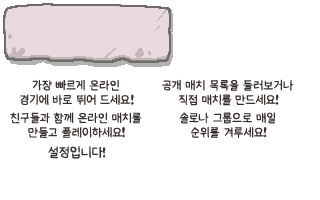
<style>
.page{position:relative;width:320px;height:200px;background:#ffffff}
.page>*{position:absolute;margin:0}
.t1{font:12px/12px "XiaolaiSC";letter-spacing:-0.075em;color:#362f2d}
.t2{font:12px/12px "XiaolaiSC";color:#362f2d}
.t3{font:13.5px/12px "IsaacGame";letter-spacing:-0.075em;color:#362f2d;scale:0.61 1}
.t4{font:13.3px "XiaolaiSC";letter-spacing:-0.075em;color:#362f2d}
.t5{font:13.5px "IsaacGame";letter-spacing:-0.075em;color:#362f2d;scale:0.61 1}
</style>
<div class="page">
<p class="t1" style="left:20px;top:79px;width:114px;height:26px;text-align:center">가장 빠르게 온라인<br>경기에 바로 뛰어 드세<span class="t2">요</span><span class="t3">!</span></p>
<p class="t1" style="left:162px;top:79px;width:132px;height:27px;text-align:center">공개 매치 목록을 둘러보거나 직접 매치를 만드세요<span class="t3">!</span></p>
<p class="t1" style="left:10px;top:112px;width:132px;height:26px;text-align:center">친구들과 함께 온라인 매치를 만들고 플레이하세요<span class="t3">!</span></p>
<p class="t1" style="left:179px;top:112px;width:96px;height:26px;text-align:center">솔로나 그룹으로 매일<br>순위를 겨루세요<span class="t3">!</span></p>
<p class="t4" style="left:48px;top:146px;width:58px;height:13px">설정입니다<span class="t5">!</span></p>
</div>
